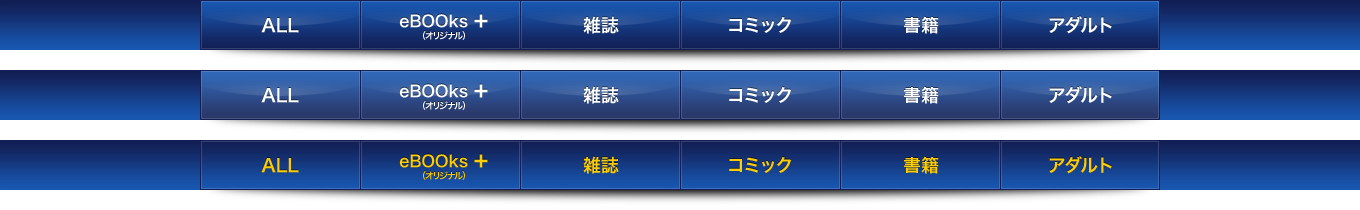
<style>
.page{position:relative;width:1360px;height:210px}
.page>*{position:absolute;margin:0}
.t1{font:9px/12px "HiraKakuPro-W6";letter-spacing:-0.1em;color:#ffffff}
.t2{font:16px/12px "HiraKakuPro-W6";color:#ffffff}
.t3{font:22px/12px "HiraKakuPro-W6";color:#ffffff}
.t4{font:18px "HiraKakuPro-W6";color:#ffffff}
.t5{font:18px "HiraKakuPro-W6";letter-spacing:-0.1em;color:#ffffff}
.t6{font:18px "HiraKakuPro-W6";color:#ffcc00}
.t7{font:9px/12px "HiraKakuPro-W6";letter-spacing:-0.1em;color:#ffcc00}
.t8{font:16px/12px "HiraKakuPro-W6";color:#ffcc00}
.t9{font:22px/12px "HiraKakuPro-W6";color:#ffcc00}
.t10{font:18px "HiraKakuPro-W6";letter-spacing:-0.1em;color:#ffcc00}
</style>
<div class="page">
<p class="t1" style="left:399px;top:14px;width:89px;height:26px;text-align:center"><span class="t2">eBOOks </span><span class="t3">+<br></span>（オリジナル）</p>
<p class="t4" style="left:583px;top:16px;width:36px;height:18px">雑誌</p>
<p class="t5" style="left:729px;top:17px;width:62px;height:16px">コミック</p>
<p class="t4" style="left:904px;top:16px;width:35px;height:18px">書籍</p>
<p class="t5" style="left:1049px;top:16px;width:63px;height:18px">アダルト</p>
<p class="t4" style="left:261px;top:18px;width:38px;height:15px">ALL</p>
<p class="t4" style="left:261px;top:88px;width:38px;height:15px">ALL</p>
<p class="t1" style="left:399px;top:84px;width:89px;height:26px;text-align:center"><span class="t2">eBOOks </span><span class="t3">+<br></span>（オリジナル）</p>
<p class="t4" style="left:583px;top:86px;width:36px;height:18px">雑誌</p>
<p class="t5" style="left:729px;top:87px;width:62px;height:16px">コミック</p>
<p class="t4" style="left:904px;top:86px;width:35px;height:18px">書籍</p>
<p class="t5" style="left:1049px;top:86px;width:63px;height:18px">アダルト</p>
<p class="t6" style="left:261px;top:158px;width:38px;height:15px">ALL</p>
<p class="t7" style="left:399px;top:154px;width:89px;height:26px;text-align:center"><span class="t8">eBOOks </span><span class="t9">+<br></span>（オリジナル）</p>
<p class="t6" style="left:583px;top:156px;width:36px;height:18px">雑誌</p>
<p class="t10" style="left:729px;top:157px;width:62px;height:16px">コミック</p>
<p class="t6" style="left:904px;top:156px;width:35px;height:18px">書籍</p>
<p class="t10" style="left:1049px;top:156px;width:63px;height:18px">アダルト</p>
</div>
